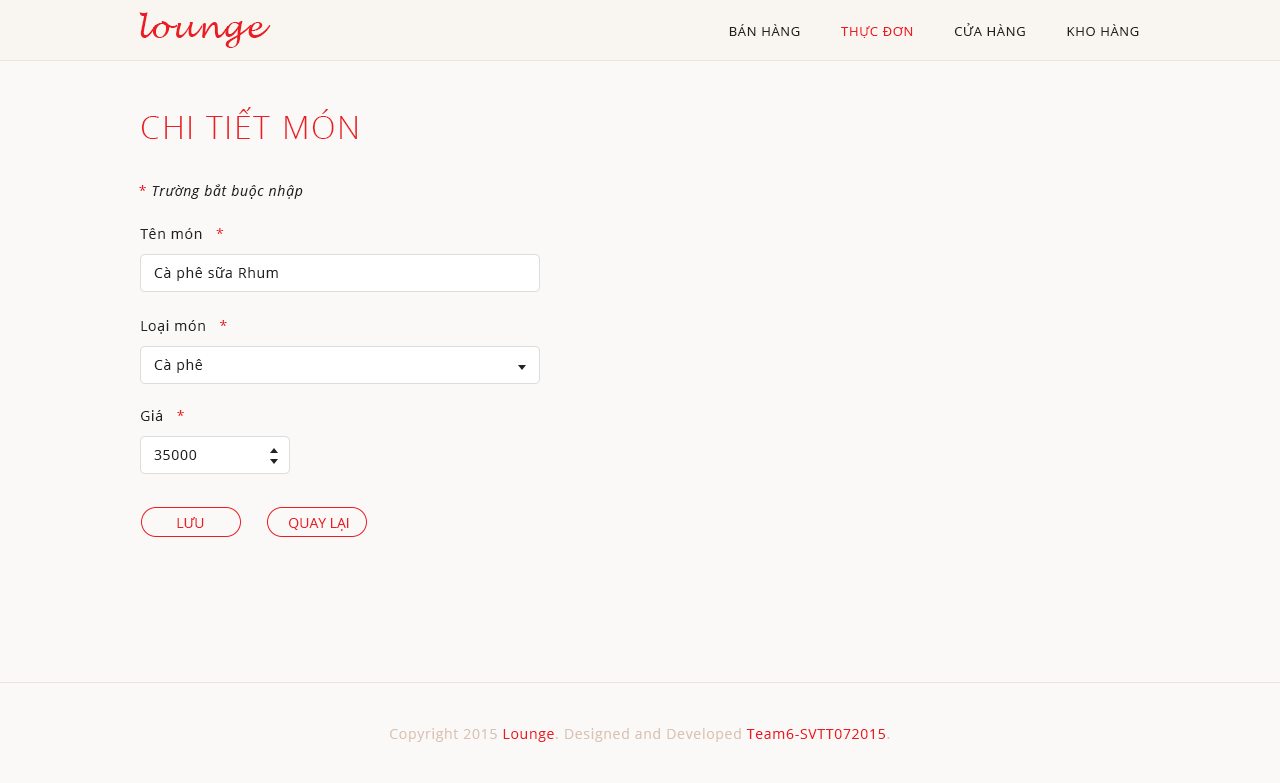
<style>
.page{position:relative;width:1280px;height:783px;background:#fbf9f7}
.page>*{position:absolute;margin:0}
.t1{font:30px "LucidaHandwriting-Italic";letter-spacing:0.05em;color:#ea1d24}
.t2{font:13px "OpenSans";letter-spacing:0.05em;color:#222222}
.t3{font:13px "OpenSans";letter-spacing:0.05em;color:#ea1d24}
.t4{font:32px "OpenSans-Light";letter-spacing:0.05em;color:#ea1d24}
.t5{font:14px "OpenSans-Italic";letter-spacing:0.05em;color:#222222}
.t6{font:14px "OpenSans";letter-spacing:0.05em;color:#ea1d24}
.t7{font:14px "OpenSans";letter-spacing:0.05em;color:#222222}
.t8{font:14px "OpenSans";color:#ea1d24}
.t9{font:14px "OpenSans";letter-spacing:0.05em;color:#dac3b4}
.t10{font:14px "OpenSans";letter-spacing:0.05em;color:#ea1b23}
</style>
<div class="page">
<p class="t1" style="left:139px;top:12px;width:132px;height:36px">lounge</p>
<p class="t2" style="left:729px;top:23px;width:410px;height:15px">BÁN HÀNG        <span class="t3">  THỰC ĐƠN   </span>       CỬA HÀNG          KHO HÀNG</p>
<p class="t4" style="left:141px;top:107px;width:216px;height:32px">CHI TIẾT MÓN</p>
<p class="t5" style="left:139px;top:184px;width:164px;height:15px"><span class="t6">* </span>Trường bắt buộc nhập</p>
<p class="t7" style="left:140px;top:228px;width:84px;height:11px">Tên món   <span class="t6">*</span></p>
<p class="t7" style="left:154px;top:267px;width:124px;height:14px">Cà phê sữa Rhum</p>
<p class="t7" style="left:141px;top:320px;width:86px;height:14px">Loại món   <span class="t6">*</span></p>
<p class="t7" style="left:154px;top:359px;width:48px;height:14px">Cà phê</p>
<p class="t7" style="left:141px;top:410px;width:43px;height:11px">Giá   <span class="t6">*</span></p>
<p class="t7" style="left:154px;top:450px;width:43px;height:10px">35000</p>
<p class="t8" style="left:177px;top:517px;width:27px;height:11px">LƯU</p>
<p class="t8" style="left:289px;top:518px;width:60px;height:13px">QUAY LẠI</p>
<p class="t9" style="left:390px;top:728px;width:500px;height:14px">Copyright 2015 <span class="t10">Lounge</span>. Designed and Developed <span class="t10">Team6-SVTT072015</span>.</p>
</div>
